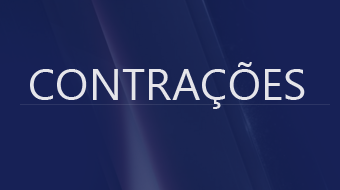
<style>
.page{position:relative;width:340px;height:190px;background:#172156}
.page>*{position:absolute;margin:0}
.t1{font:44.3px "KhmerUI";color:#e5e5ea}
</style>
<div class="page">
<p class="t1" style="left:30px;top:62px;width:275px;height:47px">CONTRAÇÕES</p>
</div>
